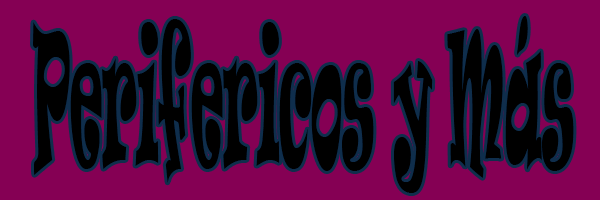
<style>
.page{position:relative;width:600px;height:200px;background:#850054}
.page>*{position:absolute;margin:0}
.t1{font:175.8px "Ravie";color:#000000;scale:0.25 1}
</style>
<div class="page">
<p class="t1" style="left:33px;top:16px;width:541px;height:177px">Perifericos y Más</p>
</div>
